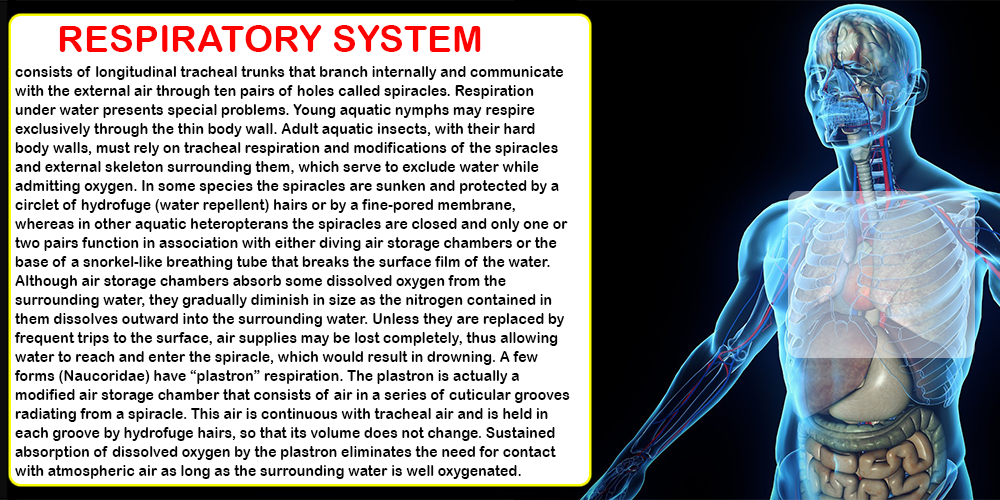
<style>
.page{position:relative;width:1000px;height:500px;background:#ffffff}
.page>*{position:absolute;margin:0}
.t1{font:37.4px "ArialRoundedMTBold";color:#fe0202}
.t2{font:15.8px "ArialRoundedMTBold";color:#030303;scale:0.9 1}
</style>
<div class="page">
<p class="t1" style="left:59px;top:25px;width:422px;height:27px">RESPIRATORY SYSTEM</p>
<p class="t2" style="left:14px;top:66px;width:556px;height:413px">consists of longitudinal tracheal trunks that branch internally and communicate with the external air through ten pairs of holes called spiracles. Respiration under water presents special problems. Young aquatic nymphs may respire exclusively through the thin body wall. Adult aquatic insects, with their hard body walls, must rely on tracheal respiration and modifications of the spiracles and external skeleton surrounding them, which serve to exclude water while admitting oxygen. In some species the spiracles are sunken and protected by a circlet of hydrofuge (water repellent) hairs or by a fine-pored membrane, whereas in other aquatic heteropterans the spiracles are closed and only one or two pairs function in association with either diving air storage chambers or the base of a snorkel-like breathing tube that breaks the surface film of the water. Although air storage chambers absorb some dissolved oxygen from the surrounding water, they gradually diminish in size as the nitrogen contained in them dissolves outward into the surrounding water. Unless they are replaced by frequent trips to the surface, air supplies may be lost completely, thus allowing water to reach and enter the spiracle, which would result in drowning. A few forms (Naucoridae) have “plastron” respiration. The plastron is actually a modified air storage chamber that consists of air in a series of cuticular grooves radiating from a spiracle. This air is continuous with tracheal air and is held in each groove by hydrofuge hairs, so that its volume does not change. Sustained absorption of dissolved oxygen by the plastron eliminates the need for contact with atmospheric air as long as the surrounding water is well oxygenated.</p>
</div>
